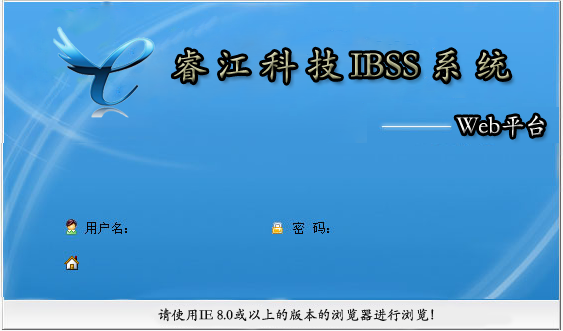
<style>
.page{position:relative;width:563px;height:331px}
.page>*{position:absolute;margin:0}
.t1{font:36px "STKaiti"}
.t2{font:24px "STKaiti";color:#eeeeee}
.t3{font:14px "STKaiti";color:#0c0c0c}
</style>
<div class="page">
<p class="t1" style="left:173px;top:49px;width:337px;height:34px">睿 江 科 技 IBSS 系 统</p>
<p class="t2" style="left:456px;top:115px;width:88px;height:22px">Web平台</p>
<p class="t3" style="left:158px;top:308px;width:276px;height:14px">请使用IE 8.0或以上的版本的浏览器进行浏览！</p>
</div>
